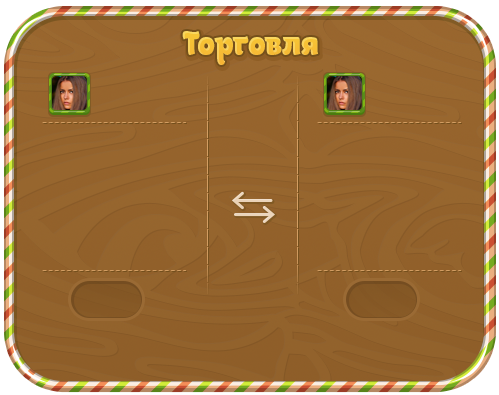
<style>
.page{position:relative;width:499px;height:395px}
.page>*{position:absolute;margin:0}
.t1{font:34.1px "ALSMalina";color:#f6c735;scale:0.78 1}
</style>
<div class="page">
<p class="t1" style="left:182px;top:31px;width:136px;height:34px">Торговля</p>
</div>
